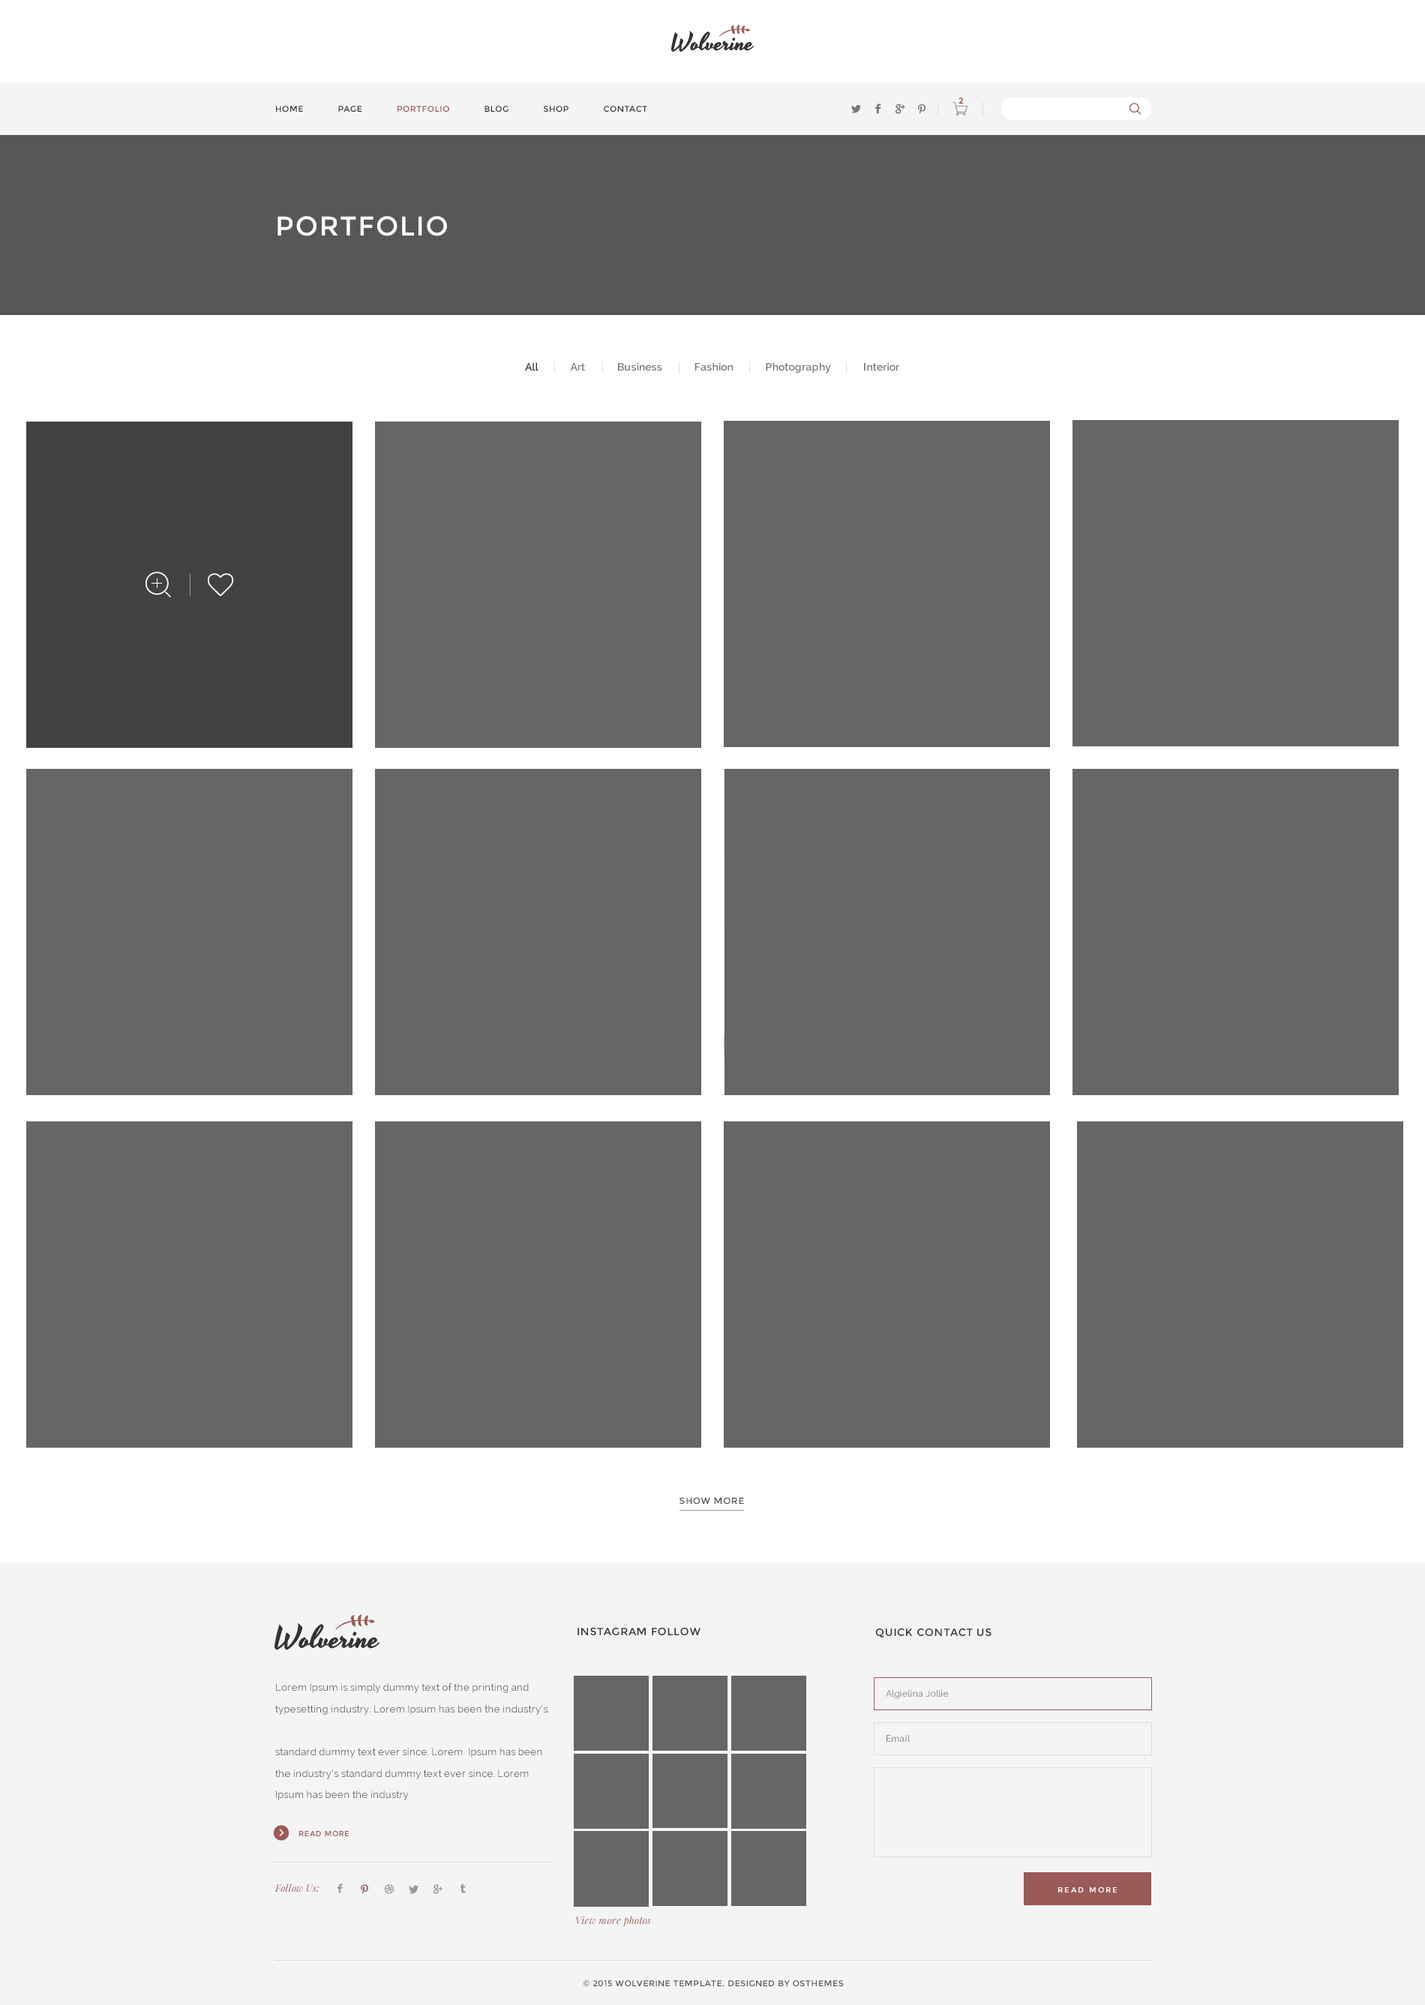
<style>
.page{position:relative;width:1425px;height:2005px;background:#666666}
.page>*{position:absolute;margin:0}
.t1{font:8.2px "Montserrat-Regular";color:#9a5a58;font-weight:bold}
.t2{font:8.2px "Montserrat-Regular";letter-spacing:0.05em;color:#333333}
.t3{font:8.2px "Montserrat-Regular";letter-spacing:0.05em;color:#9b5a57}
.t4{font:27px "Montserrat-Regular";letter-spacing:0.05em;color:#ffffff}
.t5{font:10.5px "Raleway-SemiBold";letter-spacing:0.02em;color:#777777}
.t6{font:10.5px "Raleway-SemiBold";letter-spacing:0.02em;color:#333333}
.t7{font:9px "Montserrat-Regular";letter-spacing:0.05em;color:#555555}
.t8{font:10.5px "Montserrat-Regular";letter-spacing:0.05em;color:#333333}
.t9{font:9.8px/21.5px "Raleway";letter-spacing:0.02em;color:#555555}
.t10{font:9px "Raleway";letter-spacing:0.02em;color:#777777}
.t11{font:7.5px "Montserrat-Regular";letter-spacing:0.05em;color:#9a5a58}
.t12{font:9.8px "PlayfairDisplay-Italic";letter-spacing:0.02em;color:#995958}
.t13{font:7.5px "Montserrat-Regular";letter-spacing:0.2em;color:#ffffff}
.t14{font:9.8px "PlayfairDisplay-Italic";letter-spacing:0.02em;color:#9a5a58}
.t15{font:8.2px "Montserrat-Regular";letter-spacing:0.05em;color:#555555}
</style>
<div class="page">
<p class="t1" style="left:958px;top:98px;width:6px;height:6px">2</p>
<p class="t2" style="left:276px;top:106px;width:371px;height:6px">HOME      PAGE      <span class="t3">PORTFOLIO</span>      BLOG      SHOP      CONTACT</p>
<p class="t4" style="left:278px;top:216px;width:169px;height:20px">PORTFOLIO</p>
<p class="t5" style="left:525px;top:362px;width:374px;height:12px"><span class="t6">All</span>             Art             Business             Fashion             Photography             Interior</p>
<p class="t7" style="left:680px;top:1497px;width:64px;height:7px">SHOW MORE</p>
<p class="t8" style="left:578px;top:1628px;width:122px;height:7px">INSTAGRAM FOLLOW</p>
<p class="t8" style="left:875px;top:1628px;width:117px;height:9px">QUICK CONTACT US</p>
<p class="t9" style="left:275px;top:1683px;width:273px;height:117px">Lorem Ipsum is simply dummy text of the printing and typesetting industry. Lorem Ipsum has been the industry’s <br> <br>standard dummy text ever since. Lorem  Ipsum has been the industry’s standard dummy text ever since. Lorem  Ipsum has been the industry</p>
<p class="t10" style="left:886px;top:1690px;width:63px;height:9px">Algielina Jollie</p>
<p class="t10" style="left:886px;top:1735px;width:24px;height:7px">Email</p>
<p class="t11" style="left:299px;top:1830px;width:50px;height:6px">READ MORE</p>
<p class="t12" style="left:274px;top:1883px;width:46px;height:9px">Follow Us:</p>
<p class="t13" style="left:1058px;top:1886px;width:59px;height:6px">READ MORE</p>
<p class="t14" style="left:576px;top:1916px;width:75px;height:10px">View more photos</p>
<p class="t15" style="left:583px;top:1980px;width:261px;height:7px">© 2015 WOLVERINE TEMPLATE. DESIGNED BY OSTHEMES</p>
</div>
